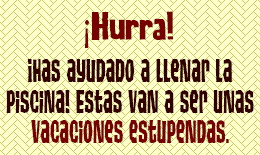
<style>
.page{position:relative;width:260px;height:155px;background:#ffffcc}
.page>*{position:absolute;margin:0}
.t1{font:40.1px "DKLunisolar-Regular";color:#770000;scale:0.84 1}
.t2{font:40.1px "MyriadPro-Regular";color:#770000;scale:0.84 1}
.t3{font:32.7px/30.6px "TikiIsland";color:#330000;scale:0.7 1}
.t4{font:32.7px/30.6px "TikiIsland";color:#770000;scale:0.7 1}
</style>
<div class="page">
<p class="t1" style="left:85px;top:11px;width:88px;height:37px"><span class="t2">¡</span>Hurra!</p>
<p class="t3" style="left:6px;top:59px;width:248px;height:84px;text-align:center">¡Has ayudado a llenar la<br>piscina! Estas van a ser unas<br><span class="t4">vacaciones estupendas.</span></p>
</div>
